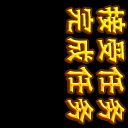
<style>
.page{position:relative;width:128px;height:128px;background:#000000}
.page>*{position:absolute;margin:0}
.t1{font:28px "FZYHJW--GB1-0";letter-spacing:0.075em}
</style>
<div class="page">
<p class="t1" style="left:66px;top:8px;width:28px;height:115px;rotate:90deg">完成任务</p>
<p class="t1" style="left:97px;top:7px;width:29px;height:116px;rotate:90deg">接受任务</p>
</div>
